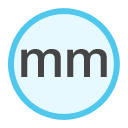
<style>
.page{position:relative;width:128px;height:128px;background:#ffffff}
.page>*{position:absolute;margin:0}
.t1{font:52.7px "HelveticaNeue-Medium";color:#454545}
</style>
<div class="page">
<p class="t1" style="left:21px;top:49px;width:86px;height:28px">mm</p>
</div>
